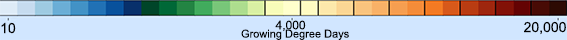
<style>
.page{position:relative;width:567px;height:40px;background:#d1e6ff}
.page>*{position:absolute;margin:0}
.t1{font:14px "ArialMT";color:#000000}
.t2{font:11px "ArialMT";color:#000000}
.t3{font:12px "ArialMT";color:#000000}
</style>
<div class="page">
<p class="t1" style="left:1px;top:22px;width:15px;height:12px">10</p>
<p class="t2" style="left:241px;top:29px;width:108px;height:11px">Growing Degree Days</p>
<p class="t3" style="left:275px;top:20px;width:31px;height:12px">4,000</p>
<p class="t1" style="left:524px;top:21px;width:42px;height:14px">20,000</p>
</div>
